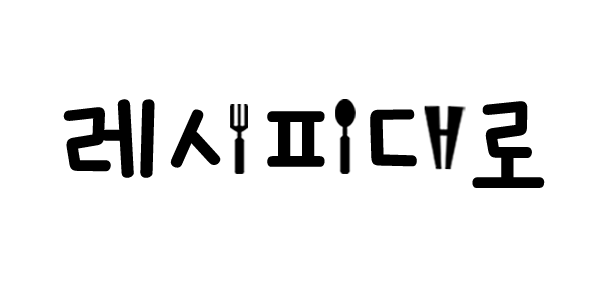
<style>
.page{position:relative;width:600px;height:300px;background:#ffffff}
.page>*{position:absolute;margin:0}
.t1{font:120px "TTRichmangoR";color:#000000}
</style>
<div class="page">
<p class="t1" style="left:63px;top:99px;width:482px;height:89px">레시피대로</p>
</div>
